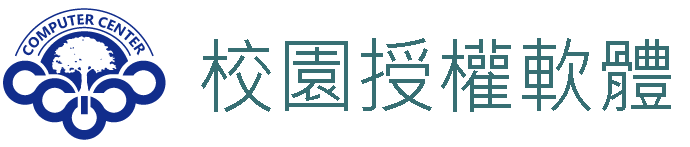
<style>
.page{position:relative;width:690px;height:147px;background:#ffffff}
.page>*{position:absolute;margin:0}
.t1{font:83.3px "MicrosoftJhengHeiRegular";color:#376f73;scale:0.96 1}
</style>
<div class="page">
<p class="t1" style="left:201px;top:38px;width:470px;height:74px">校園授權軟體</p>
</div>
